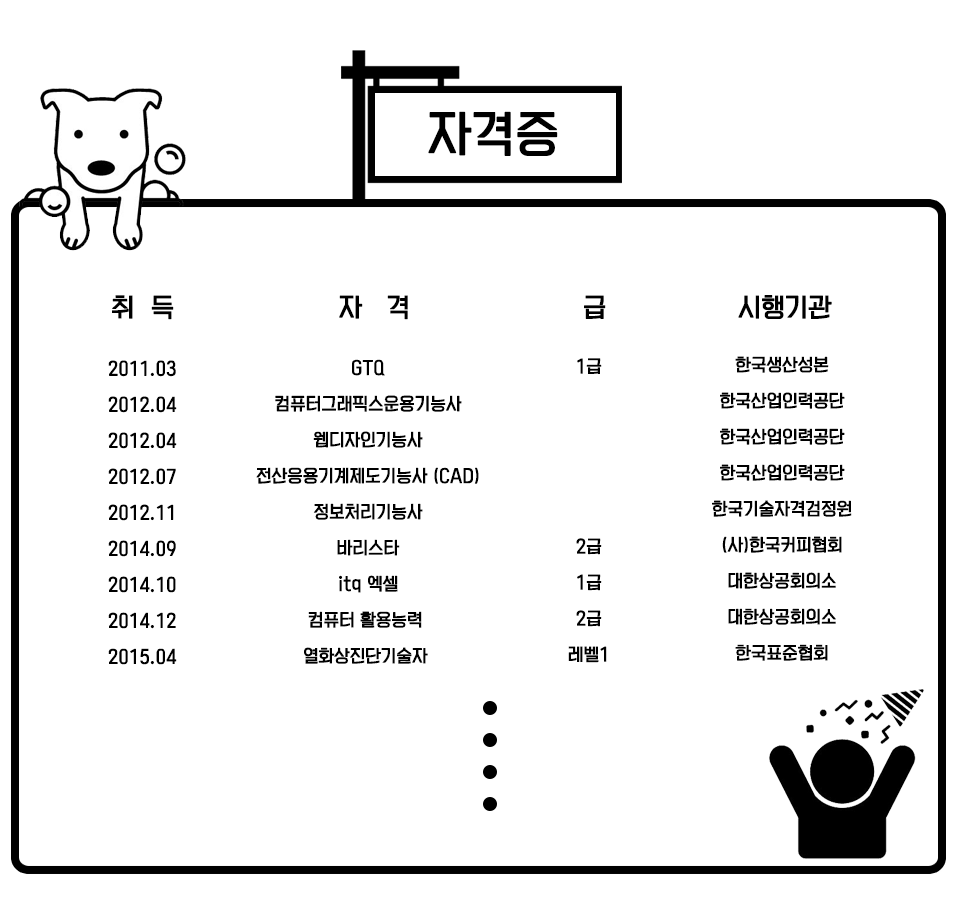
<style>
.page{position:relative;width:960px;height:900px;background:#ffffff}
.page>*{position:absolute;margin:0}
.t1{font:45px "KoreanYNSJG3-R";color:#000000;font-weight:bold}
.t2{font:24px "KoreanYNSJG3-R";color:#000000;font-weight:bold}
.t3{font:16px/36px "KoreanYNSJG3-R";color:#000000;font-weight:bold}
</style>
<div class="page">
<p class="t1" style="left:428px;top:111px;width:130px;height:45px">자격증</p>
<p class="t2" style="left:112px;top:295px;width:720px;height:25px">취  득                    자   격                     급                시행기관</p>
<p class="t3" style="left:108px;top:360px;width:69px;height:305px;text-align:center">2011.03<br>2012.04<br>2012.04<br>2012.07<br>2012.11<br>2014.09<br>2014.10<br>2014.12<br>2015.04</p>
<p class="t3" style="left:256px;top:359px;width:223px;height:305px;text-align:center">GTQ<br>컴퓨터그래픽스운용기능사<br>웹디자인기능사<br>전산응용기계제도기능사 (CAD)<br>정보처리기능사<br>바리스타<br>itq 엑셀<br>컴퓨터 활용능력 <br>열화상진단기술자</p>
<p class="t3" style="left:568px;top:358px;width:39px;height:305px;text-align:center">1급<br><br><br><br><br>2급<br>1급<br>2급<br>레벨1</p>
<p class="t3" style="left:712px;top:356px;width:140px;height:305px;text-align:center">한국생산성본<br>한국산업인력공단<br>한국산업인력공단<br>한국산업인력공단<br>한국기술자격검정원<br>(사)한국커피협회<br>대한상공회의소<br>대한상공회의소<br>한국표준협회</p>
</div>
